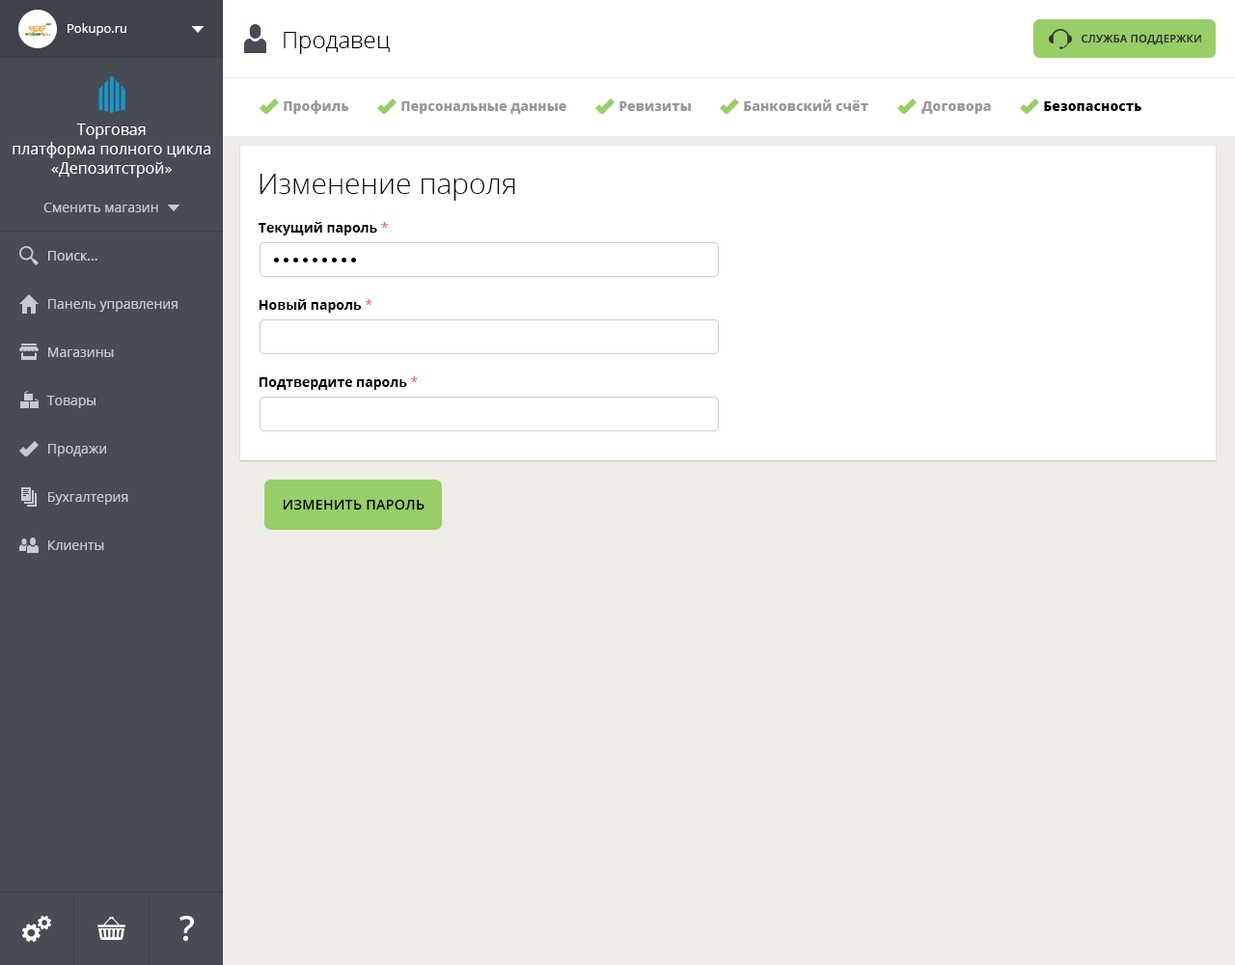
<style>
.page{position:relative;width:1235px;height:965px;background:#efece7}
.page>*{position:absolute;margin:0}
.t1{font:12.5px "OpenSans";color:#ffffff}
.t2{font:23.2px "OpenSans-Light";color:#010101}
.t3{font:10.6px "OpenSans-Semibold";letter-spacing:0.025em;color:#333333;text-transform:uppercase}
.t4{font:13.5px "OpenSans-Extrabold";color:#999999}
.t5{font:13.5px "OpenSans-Extrabold";color:#000000}
.t6{font:15.4px/19.3px "OpenSans";color:#ffffff}
.t7{font:29px "OpenSans-Light";color:#000000}
.t8{font:13.5px "OpenSans";color:#c8c9cc}
.t9{font:13.5px "OpenSans-Bold";color:#000000}
.t10{font:13.5px "OpenSans";color:#fd5656}
.t11{font:13.5px "OpenSans";color:#d3d4d5}
.t12{font:13.5px "OpenSans-Semibold";letter-spacing:0.025em;color:#000000;text-transform:uppercase}
</style>
<div class="page">
<p class="t1" style="left:68px;top:23px;width:58px;height:13px">Pokupo.ru</p>
<p class="t2" style="left:284px;top:32px;width:106px;height:22px">Продавец</p>
<p class="t3" style="left:1082px;top:34px;width:120px;height:11px">Служба поддержки</p>
<p class="t4" style="left:284px;top:100px;width:65px;height:14px">Профиль</p>
<p class="t4" style="left:402px;top:101px;width:165px;height:13px">Персональные данные</p>
<p class="t4" style="left:620px;top:101px;width:71px;height:10px">Ревизиты</p>
<p class="t4" style="left:744px;top:99px;width:125px;height:12px">Банковский счёт</p>
<p class="t4" style="left:922px;top:101px;width:69px;height:13px">Договора</p>
<p class="t5" style="left:1044px;top:101px;width:98px;height:10px">Безопасность</p>
<p class="t6" style="left:13px;top:124px;width:197px;height:54px;text-align:center">Торговая<br>платформа полного цикла<br>«Депозитстрой»</p>
<p class="t7" style="left:260px;top:174px;width:255px;height:27px">Изменение пароля</p>
<p class="t8" style="left:43px;top:203px;width:115px;height:9px">Сменить магазин</p>
<p class="t9" style="left:258px;top:222px;width:130px;height:14px">Текущий пароль <span class="t10">*</span></p>
<p class="t11" style="left:48px;top:251px;width:49px;height:10px">Поиск...</p>
<p class="t8" style="left:48px;top:299px;width:130px;height:13px">Панель управления</p>
<p class="t9" style="left:259px;top:299px;width:114px;height:14px">Новый пароль <span class="t10">*</span></p>
<p class="t8" style="left:48px;top:347px;width:66px;height:10px">Магазины</p>
<p class="t9" style="left:259px;top:376px;width:159px;height:14px">Подтвердите пароль <span class="t10">*</span></p>
<p class="t8" style="left:46px;top:396px;width:50px;height:12px">Товары</p>
<p class="t8" style="left:48px;top:444px;width:58px;height:13px">Продажи</p>
<p class="t8" style="left:48px;top:492px;width:80px;height:13px">Бухгалтерия</p>
<p class="t12" style="left:283px;top:499px;width:142px;height:12px">изменить пароль</p>
<p class="t8" style="left:48px;top:541px;width:56px;height:9px">Клиенты</p>
</div>
